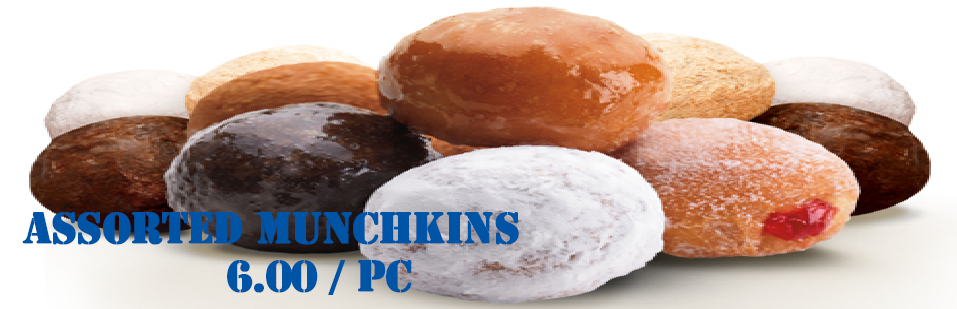
<style>
.page{position:relative;width:957px;height:309px}
.page>*{position:absolute;margin:0}
.t1{font:40px "StencilStd";letter-spacing:-0.025em;color:#0054a6;font-weight:bold}
</style>
<div class="page">
<p class="t1" style="left:22px;top:212px;width:497px;height:83px;text-align:center">ASSORTED MUNCHKINS<br>       6.00 / PC</p>
</div>
